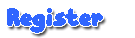
<style>
.page{position:relative;width:135px;height:38px;background:#ffffff}
.page>*{position:absolute;margin:0}
.t1{font:27.1px "FriskyPuppyRegular";color:#2f65ff;scale:1.05 1}
</style>
<div class="page">
<p class="t1" style="left:7px;top:8px;width:96px;height:25px">Register</p>
</div>
